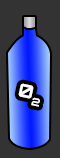
<style>
.page{position:relative;width:60px;height:158px;background:#333333}
.page>*{position:absolute;margin:0}
.t1{font:18px "Orbitron-Bold";letter-spacing:-0.005em;color:#ffffff}
</style>
<div class="page">
<p class="t1" style="left:18px;top:83px;width:22px;height:24px;rotate:12deg">02</p>
</div>
